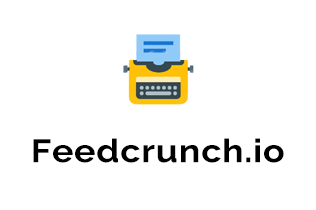
<style>
.page{position:relative;width:316px;height:210px;background:#ffffff}
.page>*{position:absolute;margin:0}
.t1{font:32.5px "Raleway-Bold";letter-spacing:0.02em;color:#000000;scale:1.1 1}
</style>
<div class="page">
<p class="t1" style="left:33px;top:138px;width:251px;height:25px">Feedcrunch.io</p>
</div>
